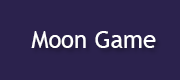
<style>
.page{position:relative;width:180px;height:80px;background:#2b224d}
.page>*{position:absolute;margin:0}
.t1{font:24px "TrebuchetMS";color:#ffffff}
</style>
<div class="page">
<p class="t1" style="left:31px;top:31px;width:125px;height:17px">Moon Game</p>
</div>
